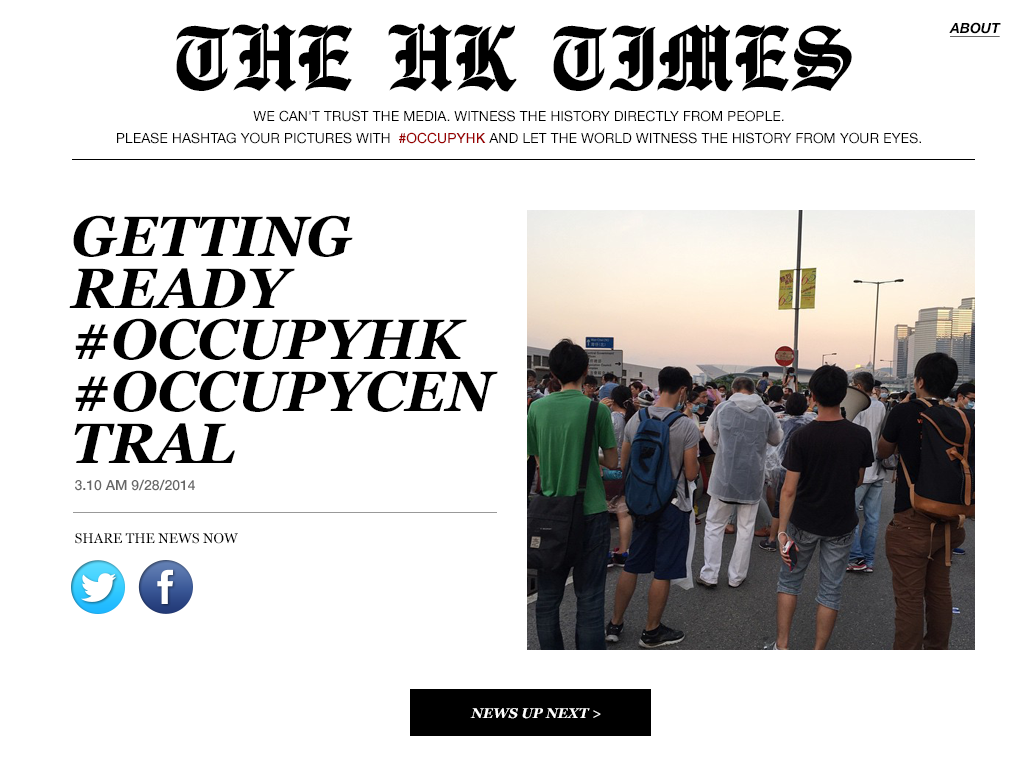
<style>
.page{position:relative;width:1024px;height:768px;background:#ffffff}
.page>*{position:absolute;margin:0}
.t1{font:99.1px "EnglishTowne-Medium";color:#000000;text-transform:uppercase}
.t2{font:14px "HelveticaNeue-BoldItalic";color:#000000;text-transform:uppercase;text-decoration:underline}
.t3{font:14px/22.4px "HelveticaNeue";color:#000000;text-transform:uppercase}
.t4{font:14px/22.4px "HelveticaNeue-Medium";color:#990000;text-transform:uppercase}
.t5{font:56.5px/51.8px "Georgia-BoldItalic";color:#000000;text-transform:uppercase}
.t6{font:14px "HelveticaNeue-Medium";color:#666666;text-transform:uppercase}
.t7{font:14px "Georgia";color:#000000}
.t8{font:13.9px "Georgia-BoldItalic";color:#ffffff;text-transform:uppercase}
</style>
<div class="page">
<p class="t1" style="left:176px;top:23px;width:676px;height:69px">THE HK TIMES</p>
<p class="t2" style="left:949px;top:22px;width:52px;height:15px">ABOUT</p>
<p class="t3" style="left:117px;top:110px;width:804px;height:34px;text-align:center">We can't trust the media. Witness the history directly from people.<br>Please hashtag your pictures with  <span class="t4">#occupyHK</span> and let the world witness the history from your eyes.</p>
<p class="t5" style="left:69px;top:215px;width:429px;height:248px">getting ready #occupyhk #occupycentral</p>
<p class="t6" style="left:75px;top:479px;width:120px;height:12px">3.10 am 9/28/2014</p>
<p class="t7" style="left:75px;top:533px;width:163px;height:11px">SHARE THE NEWS NOW</p>
<p class="t8" style="left:470px;top:708px;width:131px;height:11px">News up next &gt;</p>
</div>
